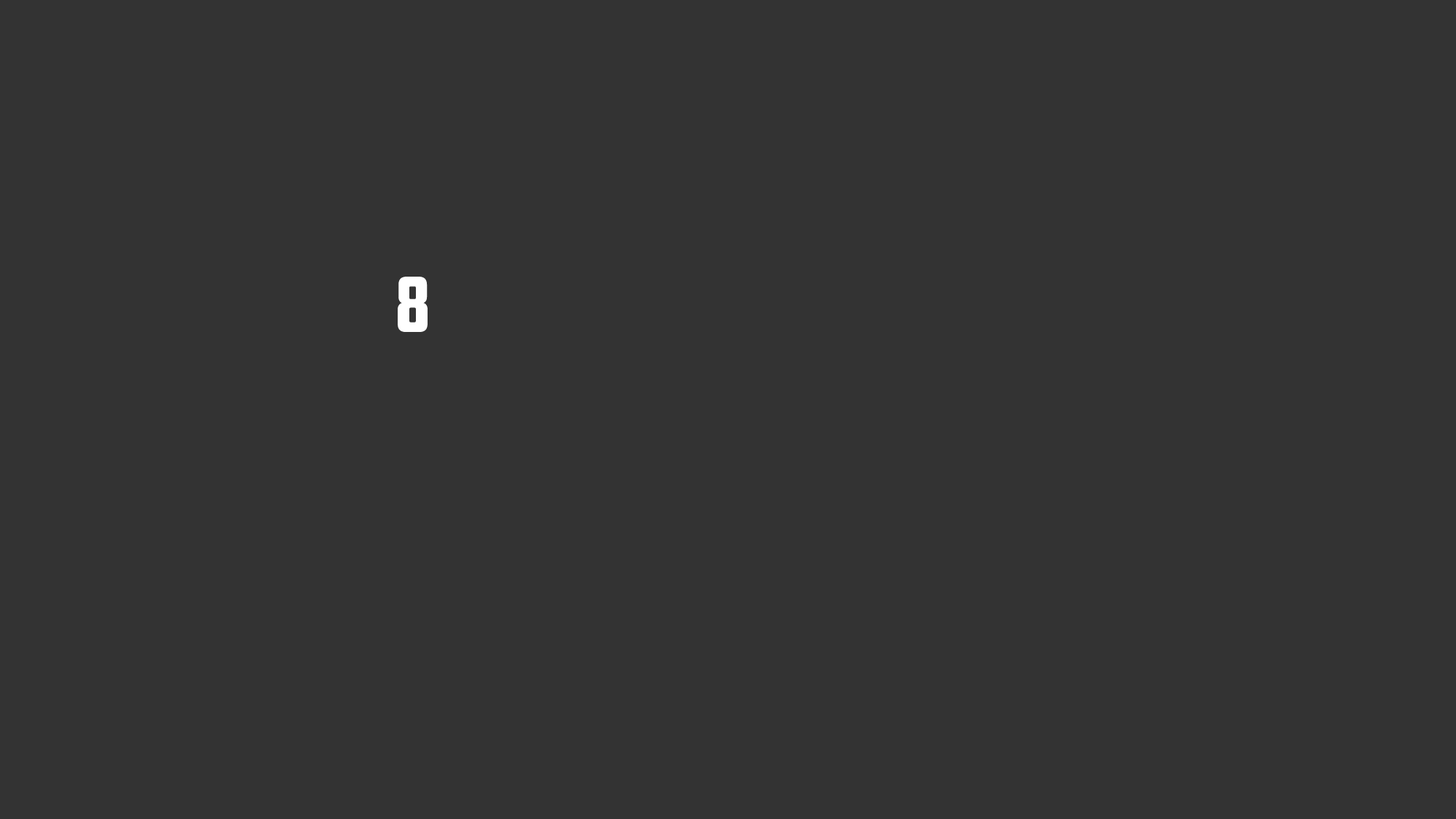
<style>
.page{position:relative;width:1456px;height:819px;background:#333333}
.page>*{position:absolute;margin:0}
.t1{font:75.9px "AmericanCaptain";color:#ffffff}
</style>
<div class="page">
<p class="t1" style="left:398px;top:277px;width:29px;height:55px">8</p>
</div>
